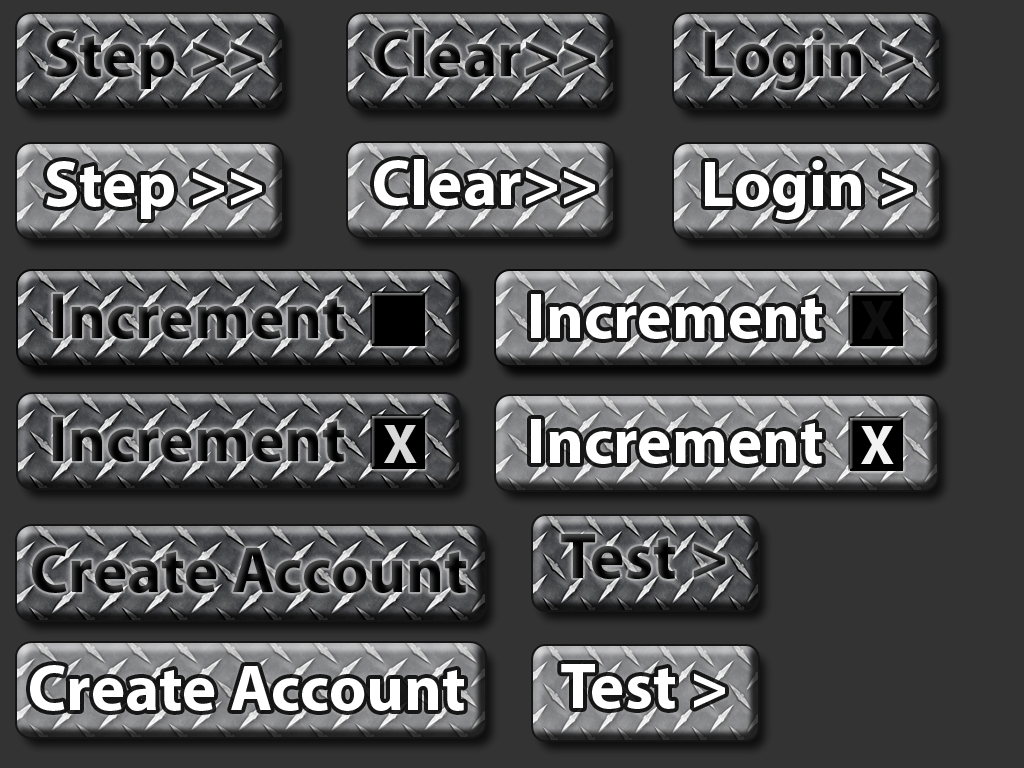
<style>
.page{position:relative;width:1024px;height:768px;background:#333333}
.page>*{position:absolute;margin:0}
.t1{font:65px "MyriadPro-Bold"}
.t2{font:65px "MyriadPro-Bold";color:#ffffff}
.t3{font:55.9px "MyriadPro-Bold";color:#0f0f0f}
.t4{font:55.9px "MyriadPro-Bold";color:#d9d9d9}
.t5{font:55.9px "MyriadPro-Bold";color:#ffffff}
</style>
<div class="page">
<p class="t1" style="left:374px;top:30px;width:221px;height:47px">Clear&gt;&gt;</p>
<p class="t1" style="left:705px;top:30px;width:208px;height:60px">Login &gt;</p>
<p class="t1" style="left:46px;top:31px;width:216px;height:58px">Step &gt;&gt;</p>
<p class="t2" style="left:46px;top:161px;width:216px;height:58px">Step &gt;&gt;</p>
<p class="t2" style="left:374px;top:159px;width:221px;height:47px">Clear&gt;&gt;</p>
<p class="t2" style="left:705px;top:160px;width:208px;height:60px">Login &gt;</p>
<p class="t1" style="left:53px;top:294px;width:291px;height:45px">Increment</p>
<p class="t1" style="left:53px;top:294px;width:291px;height:45px">Increment</p>
<p class="t2" style="left:531px;top:294px;width:291px;height:45px">Increment</p>
<p class="t2" style="left:531px;top:294px;width:291px;height:45px">Increment</p>
<p class="t3" style="left:861px;top:301px;width:33px;height:38px">X</p>
<p class="t3" style="left:861px;top:301px;width:33px;height:38px">X</p>
<p class="t1" style="left:53px;top:417px;width:291px;height:45px">Increment</p>
<p class="t4" style="left:384px;top:425px;width:33px;height:38px">X</p>
<p class="t2" style="left:531px;top:419px;width:291px;height:45px">Increment</p>
<p class="t5" style="left:861px;top:426px;width:33px;height:38px;opacity:0.95">X</p>
<p class="t1" style="left:561px;top:534px;width:164px;height:45px">Test &gt;</p>
<p class="t1" style="left:32px;top:547px;width:434px;height:46px">Create Account</p>
<p class="t2" style="left:30px;top:665px;width:434px;height:46px">Create Account</p>
<p class="t2" style="left:561px;top:664px;width:164px;height:45px">Test &gt;</p>
</div>
